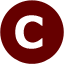
<style>
.page{position:relative;width:64px;height:64px;background:#660000}
.page>*{position:absolute;margin:0}
.t1{font:44px "Verdana-Bold";color:#ffffff}
</style>
<div class="page">
<p class="t1" style="left:15px;top:15px;width:28px;height:34px">C</p>
</div>
